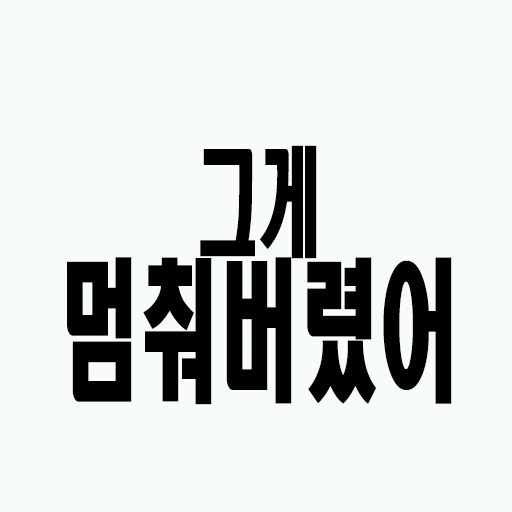
<style>
.page{position:relative;width:512px;height:512px;background:#f8fcf8}
.page>*{position:absolute;margin:0}
.t1{font:152px/125px "HeadlineR-HM";color:#000000;scale:0.53 1}
.t2{font:117.8px/125px "HeadlineR-HM";color:#000000;scale:0.53 1}
</style>
<div class="page">
<p class="t1" style="left:67px;top:145px;width:385px;height:260px;text-align:center"><span class="t2">그게<br></span>멈춰버렸어</p>
</div>
